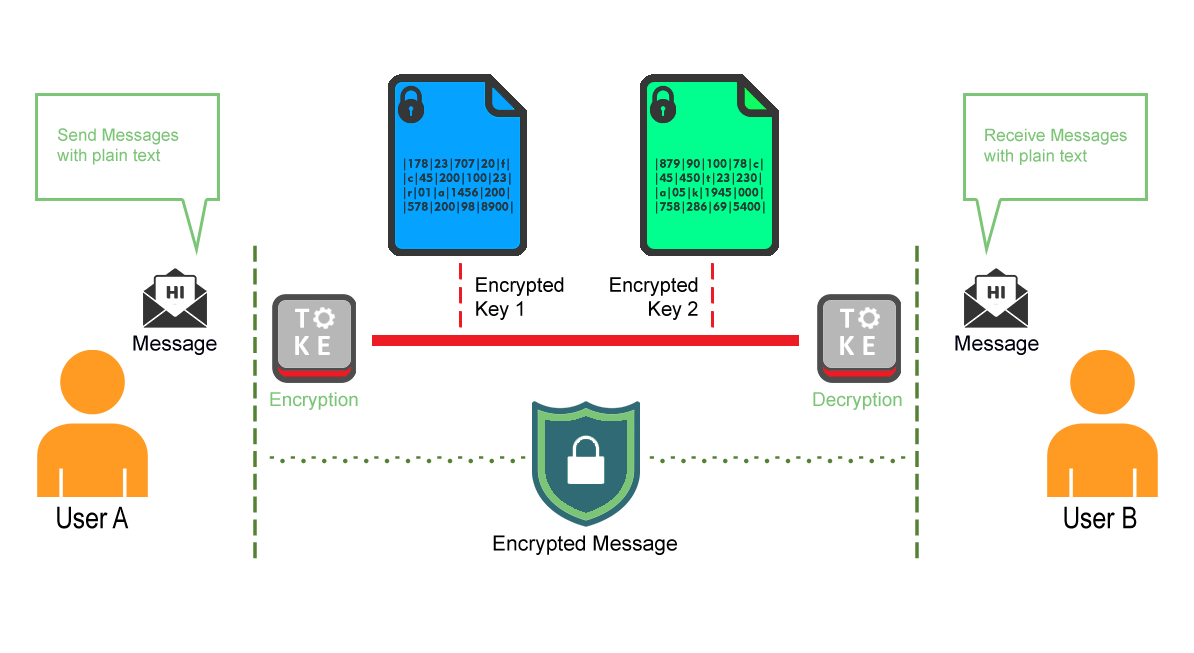
<style>
.page{position:relative;width:1194px;height:653px;background:#ffffff}
.page>*{position:absolute;margin:0}
.t1{font:17px "ArialMT";color:#7cc576}
.t2{font:19px "Bauhaus93";color:#548235}
.t3{font:20px "Baloo-Regular";color:#ed1c24}
.t4{font:20px "ArialMT";color:#020202}
.t5{font:21px "ArialMT";color:#00000e}
.t6{font:19px "ArialMT";color:#7cc576}
.t7{font:30px "ArialNarrow";color:#000000}
.t8{font:21px "ArialMT";color:#000000}
</style>
<div class="page">
<p class="t1" style="left:57px;top:128px;width:122px;height:37px">Send Messages <br>with plain text</p>
<p class="t1" style="left:984px;top:128px;width:143px;height:37px">Receive Messages <br>with plain text</p>
<p class="t2" style="left:253px;top:245px;width:4px;height:314px">|<br>|<br>|<br>|<br>|<br>|<br>|<br>|<br>|<br>|<br>|<br>|<br>|<br>|</p>
<p class="t2" style="left:915px;top:245px;width:4px;height:314px">|<br>|<br>|<br>|<br>|<br>|<br>|<br>|<br>|<br>|<br>|<br>|<br>|<br>|</p>
<p class="t3" style="left:459px;top:263px;width:3px;height:65px">|<br>|<br>|</p>
<p class="t3" style="left:711px;top:263px;width:3px;height:65px">|<br>|<br>|</p>
<p class="t4" style="left:476px;top:277px;width:88px;height:43px">Encrypted <br>Key 1</p>
<p class="t4" style="left:610px;top:277px;width:88px;height:43px;text-align:right">Encrypted<br>Key 2</p>
<p class="t5" style="left:133px;top:335px;width:84px;height:20px">Message</p>
<p class="t5" style="left:955px;top:335px;width:84px;height:20px">Message</p>
<p class="t6" style="left:270px;top:392px;width:88px;height:18px">Encryption</p>
<p class="t6" style="left:813px;top:392px;width:89px;height:18px">Decryption</p>
<p class="t2" style="left:269px;top:456px;width:257px;height:8px">- . - . - . - . - . - . - . - . - . - . - . - . -</p>
<p class="t2" style="left:649px;top:456px;width:257px;height:8px">- . - . - . - . - . - . - . - . - . - . - . - . -</p>
<p class="t7" style="left:57px;top:506px;width:72px;height:23px">User A</p>
<p class="t7" style="left:1064px;top:506px;width:73px;height:23px">User B</p>
<p class="t8" style="left:493px;top:535px;width:184px;height:20px">Encrypted Message</p>
</div>
